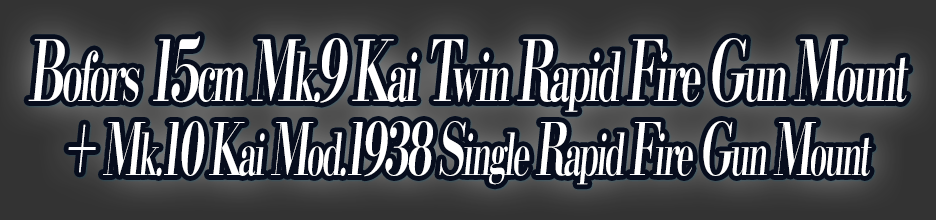
<style>
.page{position:relative;width:936px;height:220px;background:#070d1d}
.page>*{position:absolute;margin:0}
.t1{font:72px/74px "KochoStd-Heavy";letter-spacing:-0.08em;color:#ffffff;font-style:italic;scale:0.57 1}
.t2{font:84px/74px "KochoStd-Heavy";letter-spacing:-0.08em;color:#ffffff;font-style:italic;scale:0.57 1}
.t3{font:67.2px/74px "KochoStd-Heavy";letter-spacing:-0.08em;color:#ffffff;font-style:italic;scale:0.57 1}
.t4{font:57.6px/74px "KochoStd-Heavy";letter-spacing:-0.08em;color:#ffffff;font-style:italic;scale:0.57 1}
</style>
<div class="page">
<p class="t1" style="left:28px;top:36px;width:881px;height:149px;text-align:center"><span class="t2">B</span><span class="t3">ofors </span><span class="t2">15</span><span class="t3">cm </span><span class="t2">M</span><span class="t3">k.</span><span class="t2">9 K</span><span class="t3">ai</span><span class="t2"> T</span><span class="t3">win </span><span class="t2">R</span><span class="t3">apid </span><span class="t2">F</span><span class="t3">ire </span><span class="t2">G</span><span class="t3">un </span><span class="t2">M</span><span class="t3">ount<br></span>+ M<span class="t4">k.</span>10 K<span class="t4">ai </span>M<span class="t4">od.</span>1938 S<span class="t4">ingle </span>R<span class="t4">apid </span>F<span class="t4">ire </span>G<span class="t4">un </span>M<span class="t4">ount</span></p>
</div>
